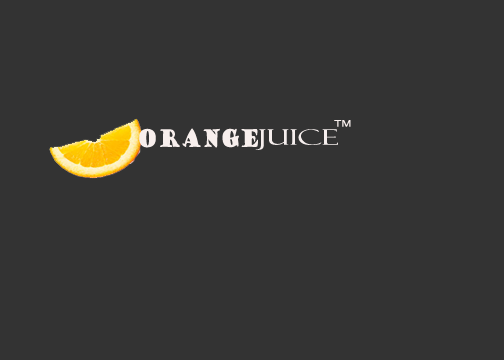
<style>
.page{position:relative;width:504px;height:360px;background:#333333}
.page>*{position:absolute;margin:0}
.t1{font:8.9px "ArialMT";color:#f8efed;scale:1.33 1}
.t2{font:23.6px "GoudyStout";color:#f8efed;scale:0.7 1}
.t3{font:21.2px "FelixTitlingMT";color:#f6efee;scale:1.46 1}
</style>
<div class="page">
<p class="t1" style="left:334px;top:120px;width:17px;height:7px">TM</p>
<p class="t2" style="left:139px;top:128px;width:119px;height:20px">orange</p>
<p class="t3" style="left:255px;top:129px;width:83px;height:21px">juice</p>
</div>
